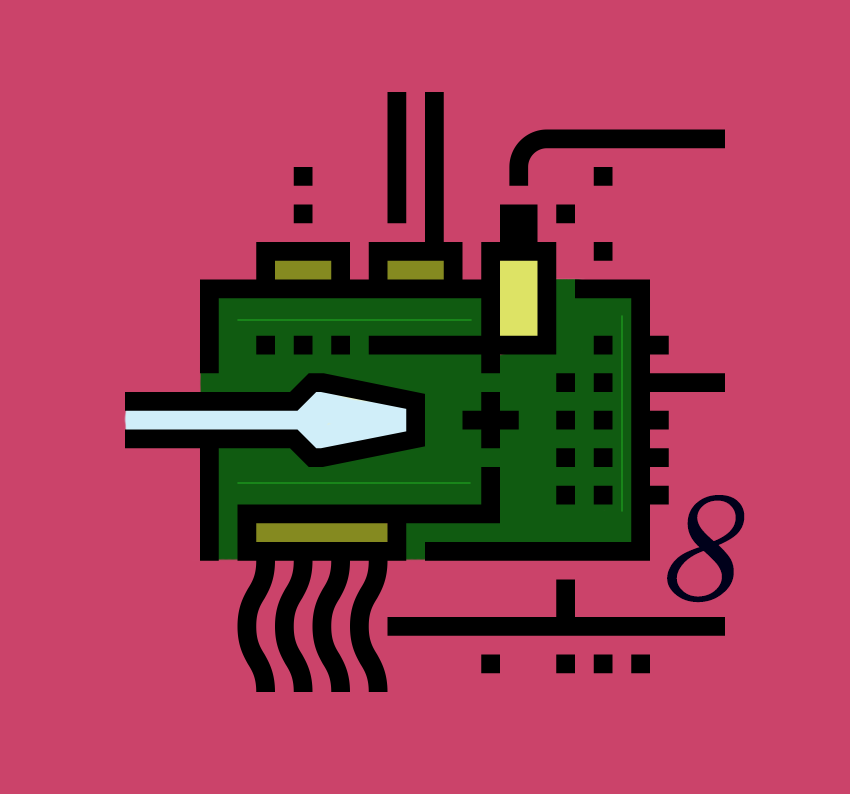
<style>
.page{position:relative;width:850px;height:794px;background:#cb436a}
.page>*{position:absolute;margin:0}
.t1{font:152.3px "CenturySchoolbook-Italic";color:#00011b}
</style>
<div class="page">
<p class="t1" style="left:667px;top:495px;width:78px;height:108px">8</p>
</div>
